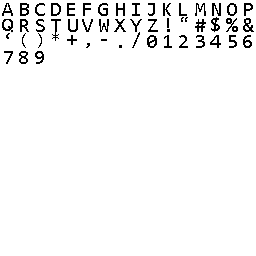
<style>
.page{position:relative;width:256px;height:256px;background:#ffffff}
.page>*{position:absolute;margin:0}
.t1{font:20.8px "Consolas";color:#000000}
.t2{font:17.4px "Consolas";color:#000000}
</style>
<div class="page">
<p class="t1" style="left:2px;top:3px;width:11px;height:13px">A</p>
<p class="t1" style="left:20px;top:3px;width:9px;height:13px">B</p>
<p class="t1" style="left:35px;top:3px;width:10px;height:13px">C</p>
<p class="t1" style="left:51px;top:3px;width:10px;height:13px">D</p>
<p class="t1" style="left:67px;top:3px;width:8px;height:13px">E</p>
<p class="t1" style="left:83px;top:3px;width:8px;height:13px">F</p>
<p class="t1" style="left:98px;top:3px;width:10px;height:13px">G</p>
<p class="t1" style="left:116px;top:3px;width:9px;height:13px">H</p>
<p class="t1" style="left:132px;top:3px;width:8px;height:13px">I</p>
<p class="t1" style="left:148px;top:3px;width:7px;height:13px">J</p>
<p class="t1" style="left:163px;top:3px;width:8px;height:13px">K</p>
<p class="t1" style="left:179px;top:3px;width:8px;height:13px">L</p>
<p class="t1" style="left:195px;top:3px;width:11px;height:13px">M</p>
<p class="t1" style="left:212px;top:3px;width:9px;height:13px">N</p>
<p class="t1" style="left:227px;top:3px;width:10px;height:13px">O</p>
<p class="t1" style="left:244px;top:3px;width:9px;height:13px">P</p>
<p class="t2" style="left:181px;top:17px;width:7px;height:5px">“</p>
<p class="t1" style="left:20px;top:19px;width:9px;height:13px">R</p>
<p class="t1" style="left:36px;top:19px;width:9px;height:13px">S</p>
<p class="t1" style="left:51px;top:19px;width:10px;height:13px">T</p>
<p class="t1" style="left:68px;top:19px;width:10px;height:13px">U</p>
<p class="t1" style="left:82px;top:19px;width:11px;height:13px">V</p>
<p class="t1" style="left:99px;top:19px;width:10px;height:13px">W</p>
<p class="t1" style="left:114px;top:19px;width:12px;height:13px">X</p>
<p class="t1" style="left:130px;top:19px;width:12px;height:13px">Y</p>
<p class="t1" style="left:148px;top:19px;width:10px;height:13px">Z</p>
<p class="t1" style="left:167px;top:18px;width:3px;height:14px">!</p>
<p class="t1" style="left:195px;top:19px;width:11px;height:13px">#</p>
<p class="t1" style="left:226px;top:18px;width:12px;height:14px">%</p>
<p class="t1" style="left:243px;top:18px;width:11px;height:14px">&amp;</p>
<p class="t2" style="left:6px;top:33px;width:4px;height:6px">‘</p>
<p class="t2" style="left:22px;top:33px;width:4px;height:15px">(</p>
<p class="t2" style="left:38px;top:33px;width:4px;height:15px">)</p>
<p class="t1" style="left:52px;top:32px;width:7px;height:9px">*</p>
<p class="t1" style="left:67px;top:35px;width:10px;height:10px">+</p>
<p class="t1" style="left:132px;top:32px;width:8px;height:16px">/</p>
<p class="t1" style="left:147px;top:35px;width:10px;height:13px">0</p>
<p class="t1" style="left:164px;top:35px;width:8px;height:13px">1</p>
<p class="t1" style="left:179px;top:35px;width:9px;height:13px">2</p>
<p class="t1" style="left:196px;top:35px;width:9px;height:13px">3</p>
<p class="t1" style="left:210px;top:35px;width:11px;height:13px">4</p>
<p class="t1" style="left:229px;top:35px;width:8px;height:13px">5</p>
<p class="t1" style="left:243px;top:35px;width:9px;height:13px">6</p>
<p class="t1" style="left:4px;top:51px;width:9px;height:13px">7</p>
<p class="t1" style="left:19px;top:51px;width:9px;height:13px">8</p>
<p class="t1" style="left:35px;top:51px;width:9px;height:13px">9</p>
<p class="t2" style="left:86px;top:43px;width:4px;height:5px">,</p>
</div>
